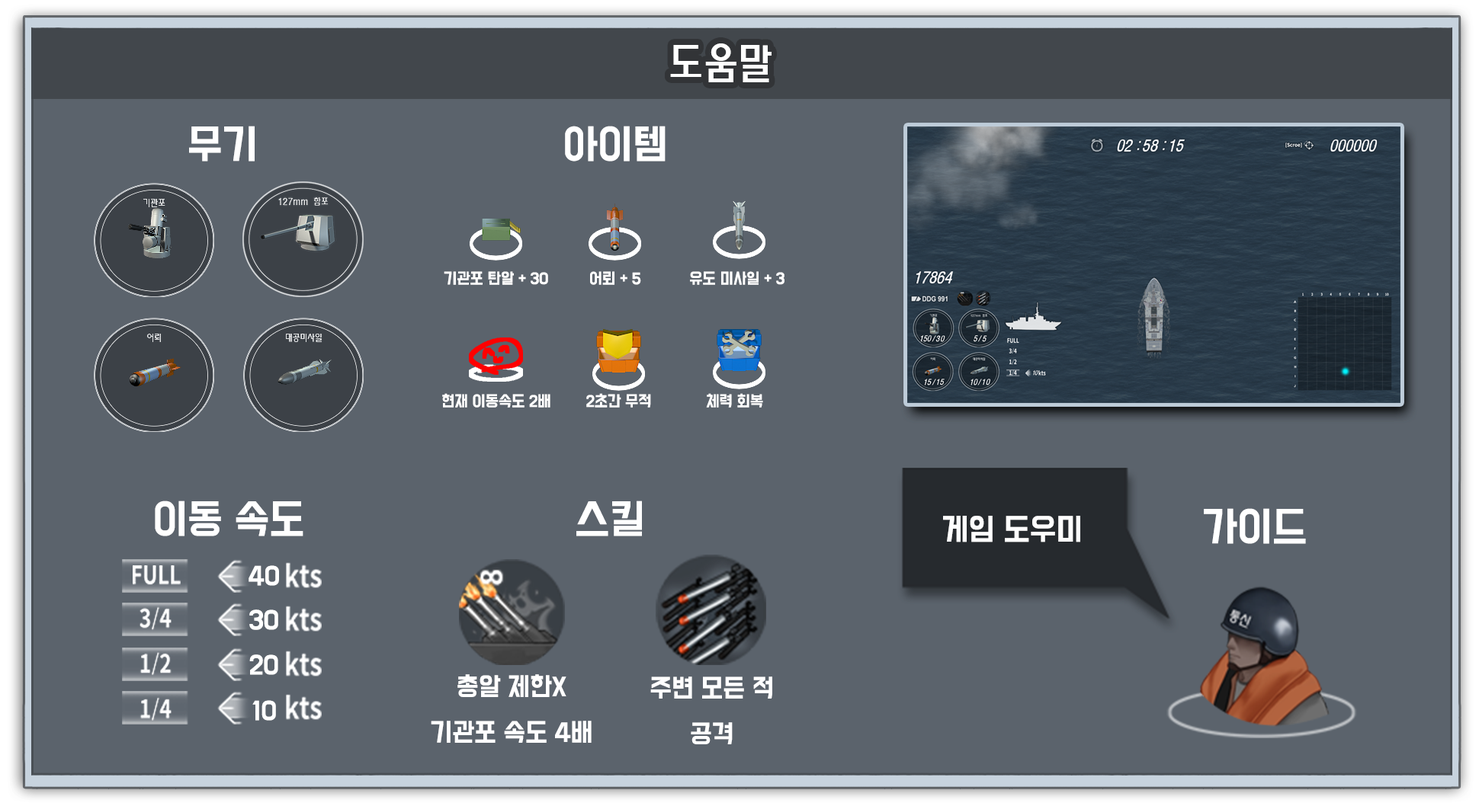
<style>
.page{position:relative;width:1479px;height:806px;background:#5b636c}
.page>*{position:absolute;margin:0}
.t1{font:36.6px "BMDoHyeon";color:#ffffff}
.t2{font:13.7px "BMDoHyeon";color:#ffffff}
.t3{font:27.4px "BMDoHyeon";color:#ffffff}
.t4{font:22.9px "BMDoHyeon";color:#ffffff}
.t5{font:22.9px/22.9px "BMDoHyeon";color:#ffffff}
</style>
<div class="page">
<p class="t1" style="left:189px;top:126px;width:66px;height:36px">무기</p>
<p class="t1" style="left:565px;top:126px;width:100px;height:36px">아이템</p>
<p class="t2" style="left:444px;top:271px;width:104px;height:14px">기관포 탄알 + 30</p>
<p class="t2" style="left:590px;top:271px;width:51px;height:14px">어뢰 + 5</p>
<p class="t2" style="left:690px;top:271px;width:94px;height:14px">유도 미사일 + 3</p>
<p class="t2" style="left:442px;top:393px;width:108px;height:15px">현재 이동속도 2배</p>
<p class="t2" style="left:586px;top:393px;width:65px;height:15px">2초간 무적</p>
<p class="t2" style="left:706px;top:393px;width:57px;height:15px">체력 회복</p>
<p class="t1" style="left:155px;top:501px;width:148px;height:36px">이동 속도</p>
<p class="t1" style="left:576px;top:501px;width:66px;height:36px">스킬</p>
<p class="t1" style="left:1204px;top:508px;width:102px;height:36px">가이드</p>
<p class="t3" style="left:943px;top:516px;width:137px;height:27px">게임 도우미</p>
<p class="t4" style="left:248px;top:566px;width:31px;height:20px">40</p>
<p class="t4" style="left:249px;top:610px;width:29px;height:20px">30</p>
<p class="t4" style="left:249px;top:655px;width:29px;height:20px">20</p>
<p class="t5" style="left:431px;top:675px;width:160px;height:68px;text-align:center">총알 제한X<br><br>기관포 속도 4배</p>
<p class="t5" style="left:650px;top:677px;width:122px;height:68px;text-align:center">주변 모든 적<br><br>공격</p>
<p class="t4" style="left:252px;top:700px;width:24px;height:21px">10</p>
</div>
